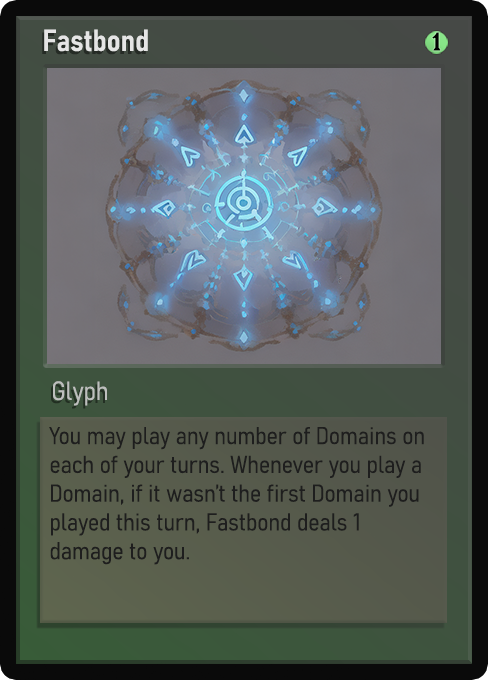
<style>
.page{position:relative;width:488px;height:680px}
.page>*{position:absolute;margin:0}
.t1{font:30px "Bahnschrift-SemiBoldSemiCondensed";color:#f2f2f2;font-weight:bold}
.t2{font:25px "WTRRoycroft";color:#000000;font-weight:bold;scale:1.09 1}
.t3{font:26px "Bahnschrift-LightSemiCondensed";color:#c8c8c8;font-weight:bold}
.t4{font:24px "Bahnschrift-LightSemiCondensed";color:#1e1e1e;font-weight:bold}
</style>
<div class="page">
<p class="t1" style="left:44px;top:29px;width:104px;height:23px;opacity:0.9">Fastbond</p>
<p class="t2" style="left:432px;top:32px;width:9px;height:19px">1</p>
<p class="t3" style="left:53px;top:381px;width:54px;height:25px;opacity:0.9">Glyph</p>
<p class="t4" style="left:49px;top:427px;width:375px;height:138px">You may play any number of Domains on each of your turns. Whenever you play a Domain, if it wasn’t the first Domain you played this turn, Fastbond deals 1 damage to you.</p>
</div>
